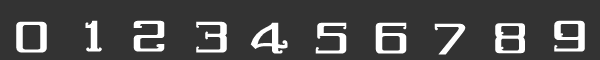
<style>
.page{position:relative;width:600px;height:60px;background:#333333}
.page>*{position:absolute;margin:0}
.t1{font:60px "Dhurjati";color:#ffffff}
</style>
<div class="page">
<p class="t1" style="left:16px;top:21px;width:31px;height:32px">0</p>
<p class="t1" style="left:85px;top:20px;width:17px;height:32px">1</p>
<p class="t1" style="left:133px;top:20px;width:32px;height:32px">2</p>
<p class="t1" style="left:196px;top:21px;width:31px;height:32px">3</p>
<p class="t1" style="left:250px;top:22px;width:38px;height:32px">4</p>
<p class="t1" style="left:315px;top:22px;width:32px;height:32px">5</p>
<p class="t1" style="left:375px;top:22px;width:32px;height:32px">6</p>
<p class="t1" style="left:434px;top:23px;width:32px;height:32px">7</p>
<p class="t1" style="left:495px;top:23px;width:30px;height:31px">8</p>
<p class="t1" style="left:554px;top:20px;width:31px;height:32px">9</p>
</div>
